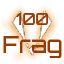
<style>
.page{position:relative;width:64px;height:64px;background:#ffffff}
.page>*{position:absolute;margin:0}
.t1{font:23px "Orbitron-Medium";color:#973b04}
.t2{font:16px "Orbitron-Medium";color:#973b04}
</style>
<div class="page">
<p class="t1" style="left:3px;top:13px;width:59px;height:45px;text-align:center"><span class="t2">100<br></span>Frag</p>
</div>
